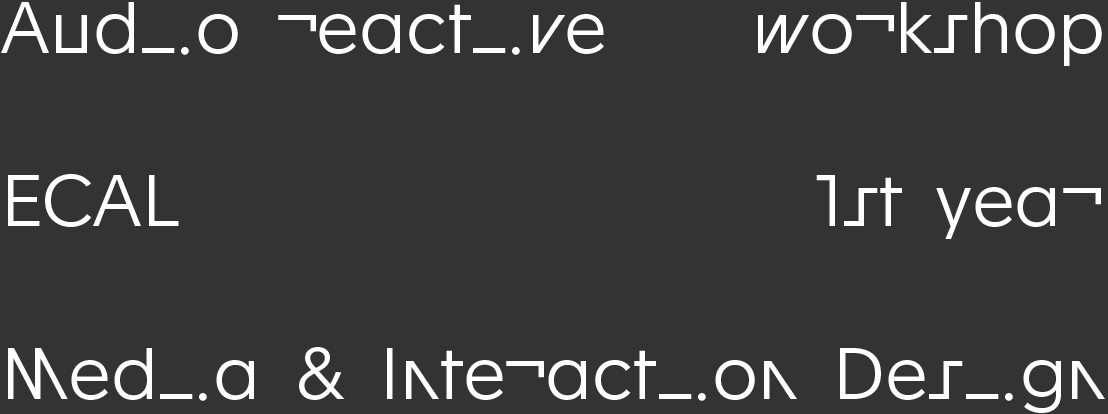
<style>
.page{position:relative;width:1108px;height:414px;background:#333333}
.page>*{position:absolute;margin:0}
.t1{font:72px "ApaxStudio-Light";color:#ffffff}
</style>
<div class="page">
<p class="t1" style="left:1px;top:2px;width:1104px;height:411px">Audio reactive    workshop<br><br>ECAL                  1st year<br><br>Media &amp; Interaction Design</p>
</div>
